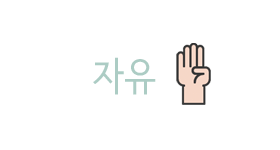
<style>
.page{position:relative;width:280px;height:150px;background:#ffffff}
.page>*{position:absolute;margin:0}
.t1{font:40px "SeN-CM";color:#acccc4}
</style>
<div class="page">
<p class="t1" style="left:93px;top:57px;width:63px;height:38px">자유</p>
</div>
